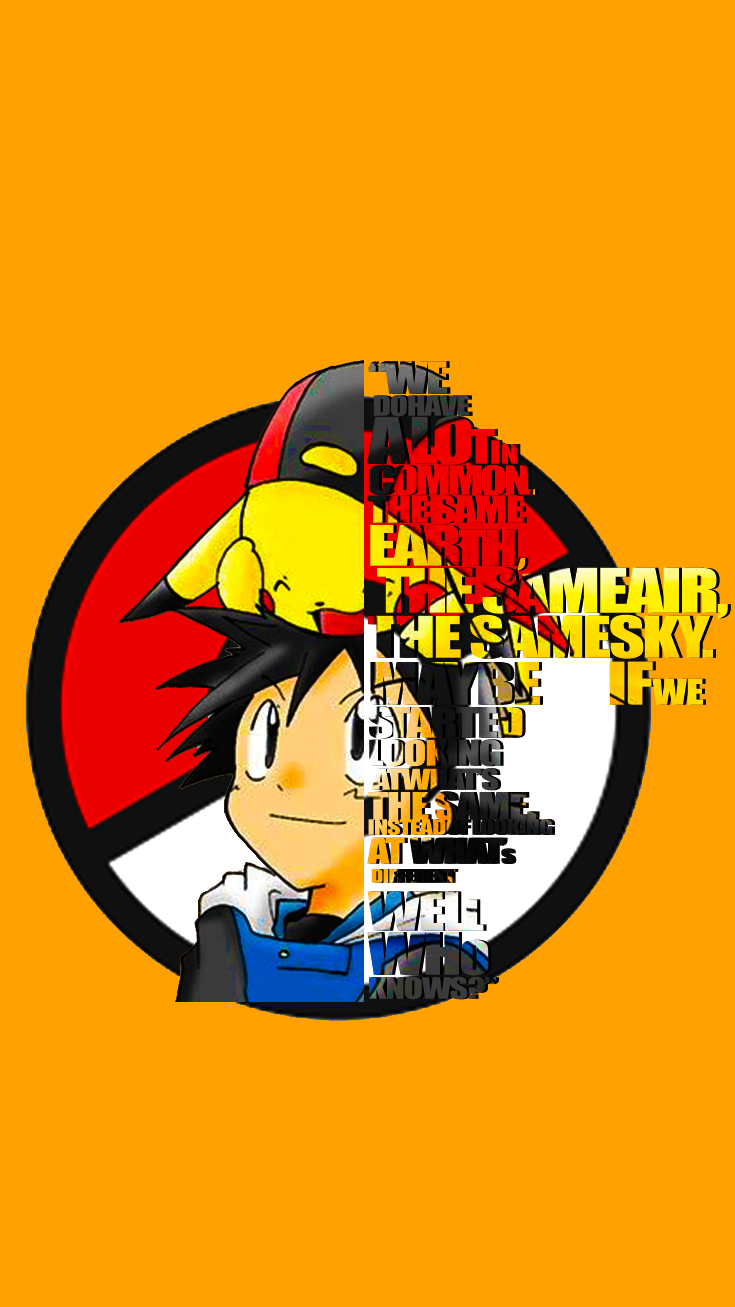
<style>
.page{position:relative;width:735px;height:1307px;background:#ffa100}
.page>*{position:absolute;margin:0}
.t1{font:19.8px/15px "Impact";letter-spacing:-0.04em;text-transform:uppercase;scale:1.32 1}
.t2{font:41px/35px "Impact";letter-spacing:-0.04em;text-transform:uppercase;scale:1.32 1}
.t3{font:25.8px/22px "Impact";letter-spacing:-0.04em;text-transform:uppercase;scale:1.32 1}
.t4{font:59.3px/48px "Impact";letter-spacing:-0.08em;text-transform:uppercase;scale:1.32 1}
.t5{font:44.1px/48px "Impact";letter-spacing:-0.14em;text-transform:uppercase;scale:1.32 1}
.t6{font:29.6px/32px "Impact";text-transform:uppercase;scale:1.32 1}
.t7{font:25.1px/32px "Impact";letter-spacing:0.02em;text-transform:uppercase;scale:1.32 1}
.t8{font:37.2px/31px "Impact";letter-spacing:-0.06em;text-transform:uppercase;scale:1.32 1}
.t9{font:35.7px/31px "Impact";letter-spacing:-0.06em;text-transform:uppercase;scale:1.32 1}
.t10{font:34.2px/28px "Impact";letter-spacing:-0.04em;text-transform:uppercase;scale:1.32 1}
.t11{font:51.7px/43px "Impact";letter-spacing:-0.04em;text-transform:uppercase;scale:1.32 1}
.t12{font:45.6px/43px "Impact";letter-spacing:-0.04em;text-transform:uppercase;scale:1.32 1}
.t13{font:57px/47px "Impact";letter-spacing:-0.06em;text-transform:uppercase;scale:1.32 1}
.t14{font:57px/47px "Impact";letter-spacing:-0.04em;text-transform:uppercase;scale:1.32 1}
.t15{font:49.4px/47px "Impact";letter-spacing:-0.04em;text-transform:uppercase;scale:1.32 1}
.t16{font:53.2px/45px "Impact";letter-spacing:-0.04em;text-transform:uppercase;scale:1.32 1}
.t17{font:54px/47px "Impact";letter-spacing:-0.04em;text-transform:uppercase;scale:1.32 1}
.t18{font:54.7px/47px "Impact";letter-spacing:-0.04em;text-transform:uppercase;scale:1.32 1}
.t19{font:54.7px/47px "Impact";letter-spacing:-0.02em;text-transform:uppercase;scale:1.32 1}
.t20{font:32.7px/47px "Impact";letter-spacing:-0.02em;text-transform:uppercase;scale:1.32 1}
.t21{font:32.7px/47px "Impact";text-transform:uppercase;scale:1.32 1}
.t22{font:38.8px/33px "Impact";letter-spacing:-0.14em;text-transform:uppercase;scale:1.32 1}
.t23{font:38.8px/33px "Impact";letter-spacing:-0.04em;text-transform:uppercase;scale:1.32 1}
.t24{font:32.7px/28px "Impact";letter-spacing:-0.04em;text-transform:uppercase;scale:1.32 1}
.t25{font:26.6px/24px "Impact";letter-spacing:-0.04em;text-transform:uppercase;scale:1.32 1}
.t26{font:26.6px/24px "Impact";letter-spacing:-0.1em;text-transform:uppercase;scale:1.32 1}
.t27{font:35px/30px "Impact";letter-spacing:-0.04em;text-transform:uppercase;scale:1.32 1}
.t28{font:53.2px/30px "Impact";letter-spacing:-0.04em;text-transform:uppercase;scale:1.32 1}
.t29{font:32.7px/29px "Impact";letter-spacing:-0.04em;text-transform:uppercase;scale:1.32 1}
.t30{font:32.7px/29px "Impact";letter-spacing:-0.1em;text-transform:uppercase;scale:1.32 1}
.t31{font:19px/29px "Impact";letter-spacing:-0.16em;text-transform:uppercase;scale:1.32 1}
.t32{font:17.5px/0px "Impact";letter-spacing:-0.04em;text-transform:uppercase;scale:1.32 1}
.t33{font:49.4px/48px "Impact";letter-spacing:-0.04em;text-transform:uppercase;scale:1.32 1}
.t34{font:39.5px/38px "Impact";letter-spacing:-0.04em;text-transform:uppercase;scale:1.32 1}
.t35{font:54px/44px "Impact";letter-spacing:-0.04em;text-transform:uppercase;scale:1.32 1}
.t36{font:43.3px/44px "Impact";letter-spacing:-0.04em;text-transform:uppercase;scale:1.32 1}
.t37{font:27.4px/24px "Impact";letter-spacing:-0.04em;text-transform:uppercase;scale:1.32 1}
</style>
<div class="page">
<p class="t1" style="left:370px;top:361px;width:361px;height:639px"><span class="t2">“We<br></span><span class="t3"> dohave<br></span><span class="t4">a lo</span><span class="t5">t </span><span class="t6">i</span><span class="t7">n<br></span><span class="t8">common</span><span class="t9">.<br></span><span class="t10">The same <br></span><span class="t11">ear</span><span class="t12">th</span><span class="t11">,<br></span><span class="t13"> the</span><span class="t14"> s</span><span class="t15">a</span><span class="t14">meair, <br></span><span class="t16">the samesky.<br></span><span class="t17">Maybe </span><span class="t18">      i</span><span class="t19">f</span><span class="t20">w</span><span class="t21">e<br></span><span class="t22">s</span><span class="t23">tarted<br></span><span class="t24">looking<br></span><span class="t25"> a</span><span class="t26">t </span><span class="t25">what’s <br></span><span class="t27">the same</span><span class="t28">, <br></span>insteadof looking <br><span class="t29">at wha</span><span class="t30">t’</span><span class="t31">s<br> </span><span class="t32">different<br></span><span class="t33">wel</span><span class="t34">l <br></span><span class="t35">wh</span><span class="t36">o <br></span><span class="t37">knows?”</span></p>
</div>
